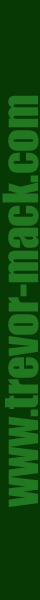
<style>
.page{position:relative;width:40px;height:600px;background:#073904}
.page>*{position:absolute;margin:0}
.t1{font:45px "Impact";color:#227821}
</style>
<div class="page">
<p class="t1" style="left:2px;top:95px;width:37px;height:412px;rotate:-90deg">www.trevor-mack.com</p>
</div>
